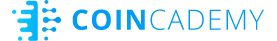
<style>
.page{position:relative;width:277px;height:41px;background:#ffffff}
.page>*{position:absolute;margin:0}
.t1{font:28px "OpenSans-Light";letter-spacing:0.05em;color:#029cf2}
.t2{font:28px "OpenSans-Bold";letter-spacing:0.05em;color:#029cf2}
</style>
<div class="page">
<p class="t1" style="left:72px;top:9px;width:192px;height:21px"><span class="t2">COIN</span>CADEMY</p>
</div>
